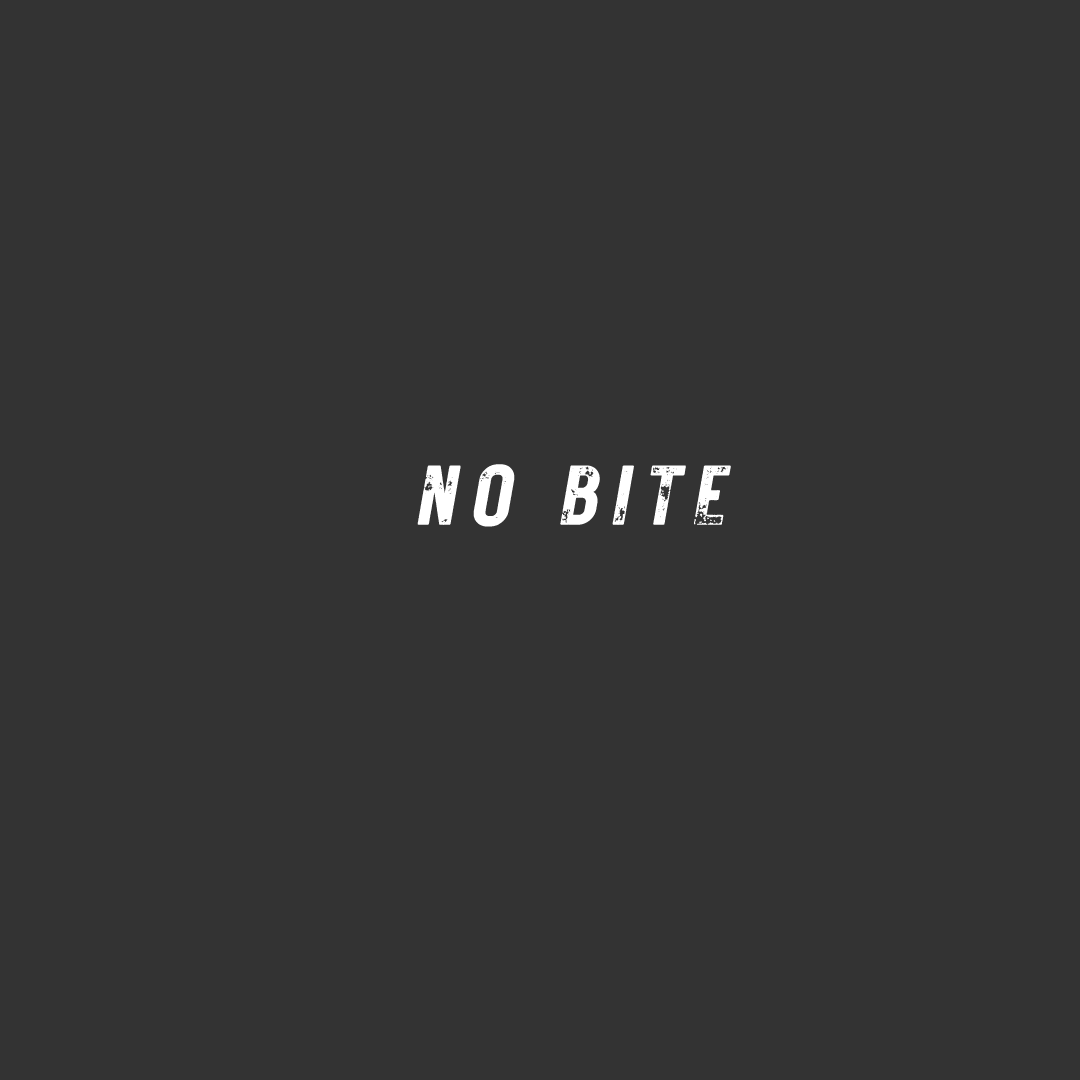
<style>
.page{position:relative;width:1080px;height:1080px;background:#333333}
.page>*{position:absolute;margin:0}
.t1{font:83.8px "RusticPrinted-Stamp";letter-spacing:0.1em;color:#ffffff;font-weight:bold;font-style:italic}
</style>
<div class="page">
<p class="t1" style="left:417px;top:464px;width:314px;height:63px">NO BITE</p>
</div>
